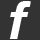
<style>
.page{position:relative;width:40px;height:40px;background:#333333}
.page>*{position:absolute;margin:0}
.t1{font:52.3px "HelveticaNeue-BoldItalic";color:#ffffff}
</style>
<div class="page">
<p class="t1" style="left:9px;top:1px;width:22px;height:38px">f</p>
</div>
